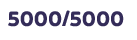
<style>
.page{position:relative;width:137px;height:40px;background:#ffffff}
.page>*{position:absolute;margin:0}
.t1{font:21px "CoHeadlineCorp-Bold";color:#342c59}
</style>
<div class="page">
<p class="t1" style="left:8px;top:10px;width:116px;height:17px">5000/5000</p>
</div>
